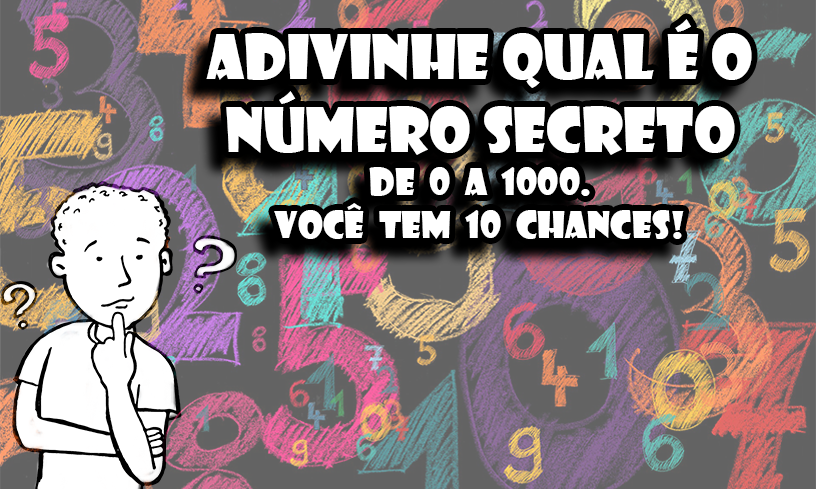
<style>
.page{position:relative;width:816px;height:489px}
.page>*{position:absolute;margin:0}
.t1{font:36px "ShowcardGothic-Reg";color:#ffffff}
.t2{font:60.1px "ShowcardGothic-Reg";color:#ffffff}
</style>
<div class="page">
<p class="t1" style="left:206px;top:19px;width:546px;height:220px;text-align:center"><span class="t2">Adivinhe qual é o número secreto<br></span>de  0  a  1000.<br>Você  tem  10  chances!</p>
</div>
